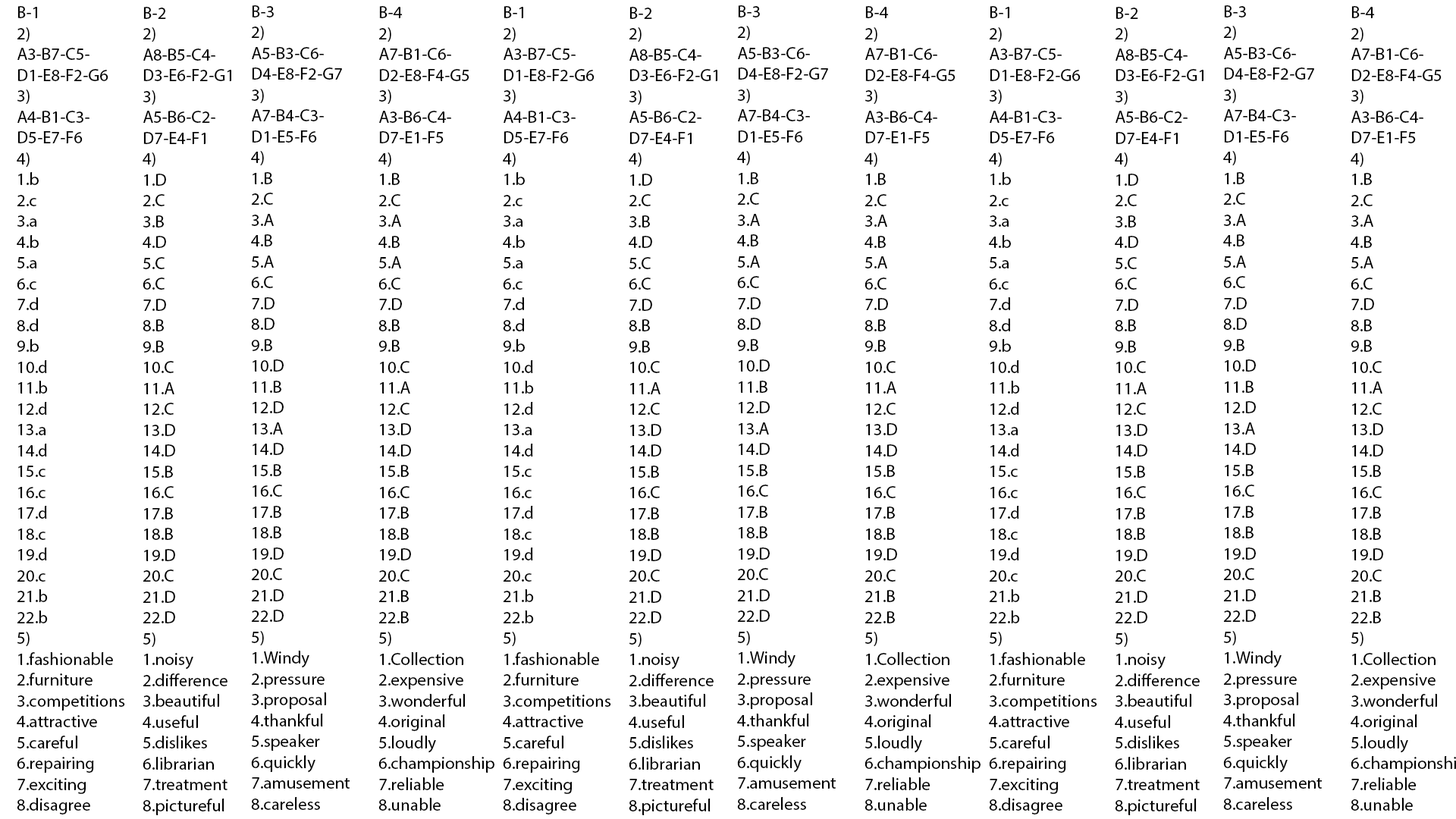
<style>
.page{position:relative;width:1456px;height:819px;background:#ffffff}
.page>*{position:absolute;margin:0}
.t1{font:17.4px "MyriadPro-Regular";color:#000000}
</style>
<div class="page">
<p class="t1" style="left:251px;top:5px;width:99px;height:805px">В-3<br>2)<br>A5-B3-C6-<br>D4-E8-F2-G7<br>3)<br>A7-B4-C3-<br>D1-E5-F6<br>4)<br>1.B<br>2.C<br>3.A<br>4.B<br>5.A<br>6.C<br>7.D<br>8.D<br>9.B<br>10.D<br>11.B<br>12.D<br>13.A<br>14.D<br>15.B<br>16.C<br>17.B<br>18.B<br>19.D<br>20.C<br>21.D<br>22.D<br>5)<br>1.Windy<br>2.pressure<br>3.proposal<br>4.thankful<br>5.speaker<br>6.quickly<br>7.amusement<br>8.careless</p>
<p class="t1" style="left:737px;top:5px;width:99px;height:805px">В-3<br>2)<br>A5-B3-C6-<br>D4-E8-F2-G7<br>3)<br>A7-B4-C3-<br>D1-E5-F6<br>4)<br>1.B<br>2.C<br>3.A<br>4.B<br>5.A<br>6.C<br>7.D<br>8.D<br>9.B<br>10.D<br>11.B<br>12.D<br>13.A<br>14.D<br>15.B<br>16.C<br>17.B<br>18.B<br>19.D<br>20.C<br>21.D<br>22.D<br>5)<br>1.Windy<br>2.pressure<br>3.proposal<br>4.thankful<br>5.speaker<br>6.quickly<br>7.amusement<br>8.careless</p>
<p class="t1" style="left:1223px;top:5px;width:100px;height:805px">В-3<br>2)<br>A5-B3-C6-<br>D4-E8-F2-G7<br>3)<br>A7-B4-C3-<br>D1-E5-F6<br>4)<br>1.B<br>2.C<br>3.A<br>4.B<br>5.A<br>6.C<br>7.D<br>8.D<br>9.B<br>10.D<br>11.B<br>12.D<br>13.A<br>14.D<br>15.B<br>16.C<br>17.B<br>18.B<br>19.D<br>20.C<br>21.D<br>22.D<br>5)<br>1.Windy<br>2.pressure<br>3.proposal<br>4.thankful<br>5.speaker<br>6.quickly<br>7.amusement<br>8.careless</p>
<p class="t1" style="left:17px;top:6px;width:108px;height:808px">В-1<br>2)<br>A3-B7-C5-<br>D1-E8-F2-G6<br>3)<br>A4-B1-C3-<br>D5-E7-F6<br>4)<br>1.b<br>2.c<br>3.a<br>4.b<br>5.a<br>6.c<br>7.d<br>8.d<br>9.b<br>10.d<br>11.b<br>12.d<br>13.a<br>14.d<br>15.c<br>16.c<br>17.d<br>18.c<br>19.d<br>20.c<br>21.b<br>22.b<br>5)<br>1.fashionable<br>2.furniture<br>3.competitions<br>4.attractive<br>5.careful<br>6.repairing<br>7.exciting<br>8.disagree</p>
<p class="t1" style="left:143px;top:7px;width:88px;height:808px">В-2<br>2)<br>A8-B5-C4-<br>D3-E6-F2-G1<br>3)<br>A5-B6-C2-<br>D7-E4-F1<br>4)<br>1.D<br>2.C<br>3.B<br>4.D<br>5.C<br>6.C<br>7.D<br>8.B<br>9.B<br>10.C<br>11.A<br>12.C<br>13.D<br>14.D<br>15.B<br>16.C<br>17.B<br>18.B<br>19.D<br>20.C<br>21.D<br>22.D<br>5)<br>1.noisy<br>2.difference<br>3.beautiful<br>4.useful<br>5.dislikes<br>6.librarian<br>7.treatment<br>8.pictureful</p>
<p class="t1" style="left:378px;top:6px;width:116px;height:805px">В-4<br>2)<br>A7-B1-C6-<br>D2-E8-F4-G5<br>3)<br>A3-B6-C4-<br>D7-E1-F5<br>4)<br>1.B<br>2.C<br>3.A<br>4.B<br>5.A<br>6.C<br>7.D<br>8.B<br>9.B<br>10.C<br>11.A<br>12.C<br>13.D<br>14.D<br>15.B<br>16.C<br>17.B<br>18.B<br>19.D<br>20.C<br>21.B<br>22.B<br>5)<br>1.Collection<br>2.expensive<br>3.wonderful<br>4.original<br>5.loudly<br>6.championship<br>7.reliable<br>8.unable</p>
<p class="t1" style="left:503px;top:6px;width:108px;height:808px">В-1<br>2)<br>A3-B7-C5-<br>D1-E8-F2-G6<br>3)<br>A4-B1-C3-<br>D5-E7-F6<br>4)<br>1.b<br>2.c<br>3.a<br>4.b<br>5.a<br>6.c<br>7.d<br>8.d<br>9.b<br>10.d<br>11.b<br>12.d<br>13.a<br>14.d<br>15.c<br>16.c<br>17.d<br>18.c<br>19.d<br>20.c<br>21.b<br>22.b<br>5)<br>1.fashionable<br>2.furniture<br>3.competitions<br>4.attractive<br>5.careful<br>6.repairing<br>7.exciting<br>8.disagree</p>
<p class="t1" style="left:629px;top:7px;width:88px;height:808px">В-2<br>2)<br>A8-B5-C4-<br>D3-E6-F2-G1<br>3)<br>A5-B6-C2-<br>D7-E4-F1<br>4)<br>1.D<br>2.C<br>3.B<br>4.D<br>5.C<br>6.C<br>7.D<br>8.B<br>9.B<br>10.C<br>11.A<br>12.C<br>13.D<br>14.D<br>15.B<br>16.C<br>17.B<br>18.B<br>19.D<br>20.C<br>21.D<br>22.D<br>5)<br>1.noisy<br>2.difference<br>3.beautiful<br>4.useful<br>5.dislikes<br>6.librarian<br>7.treatment<br>8.pictureful</p>
<p class="t1" style="left:864px;top:6px;width:117px;height:805px">В-4<br>2)<br>A7-B1-C6-<br>D2-E8-F4-G5<br>3)<br>A3-B6-C4-<br>D7-E1-F5<br>4)<br>1.B<br>2.C<br>3.A<br>4.B<br>5.A<br>6.C<br>7.D<br>8.B<br>9.B<br>10.C<br>11.A<br>12.C<br>13.D<br>14.D<br>15.B<br>16.C<br>17.B<br>18.B<br>19.D<br>20.C<br>21.B<br>22.B<br>5)<br>1.Collection<br>2.expensive<br>3.wonderful<br>4.original<br>5.loudly<br>6.championship<br>7.reliable<br>8.unable</p>
<p class="t1" style="left:989px;top:6px;width:108px;height:808px">В-1<br>2)<br>A3-B7-C5-<br>D1-E8-F2-G6<br>3)<br>A4-B1-C3-<br>D5-E7-F6<br>4)<br>1.b<br>2.c<br>3.a<br>4.b<br>5.a<br>6.c<br>7.d<br>8.d<br>9.b<br>10.d<br>11.b<br>12.d<br>13.a<br>14.d<br>15.c<br>16.c<br>17.d<br>18.c<br>19.d<br>20.c<br>21.b<br>22.b<br>5)<br>1.fashionable<br>2.furniture<br>3.competitions<br>4.attractive<br>5.careful<br>6.repairing<br>7.exciting<br>8.disagree</p>
<p class="t1" style="left:1115px;top:7px;width:88px;height:808px">В-2<br>2)<br>A8-B5-C4-<br>D3-E6-F2-G1<br>3)<br>A5-B6-C2-<br>D7-E4-F1<br>4)<br>1.D<br>2.C<br>3.B<br>4.D<br>5.C<br>6.C<br>7.D<br>8.B<br>9.B<br>10.C<br>11.A<br>12.C<br>13.D<br>14.D<br>15.B<br>16.C<br>17.B<br>18.B<br>19.D<br>20.C<br>21.D<br>22.D<br>5)<br>1.noisy<br>2.difference<br>3.beautiful<br>4.useful<br>5.dislikes<br>6.librarian<br>7.treatment<br>8.pictureful</p>
</div>
